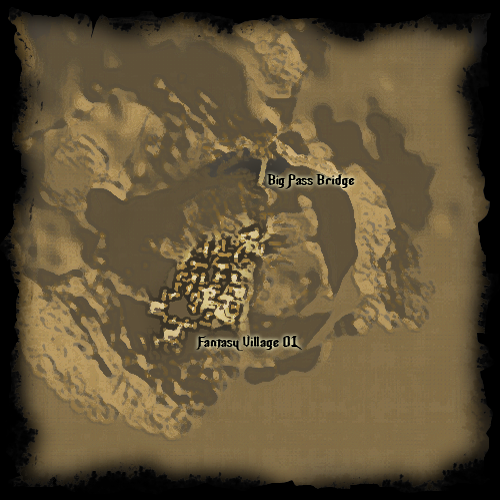
<style>
.page{position:relative;width:500px;height:500px}
.page>*{position:absolute;margin:0}
.t1{font:14.6px "NightwarriorNormal";color:#000000}
</style>
<div class="page">
<p class="t1" style="left:267px;top:174px;width:88px;height:15px">Big Pass Bridge</p>
<p class="t1" style="left:196px;top:335px;width:106px;height:16px">Fantasy Village 01</p>
</div>
